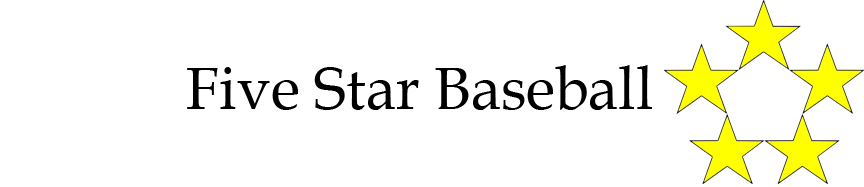
<style>
.page{position:relative;width:864px;height:187px;background:#ffffff}
.page>*{position:absolute;margin:0}
.t1{font:60px "BookAntiqua";color:#000000}
</style>
<div class="page">
<p class="t1" style="left:187px;top:65px;width:465px;height:45px">Five Star Baseball</p>
</div>
